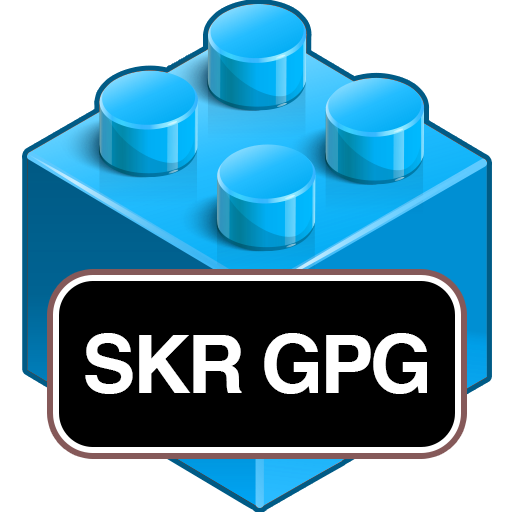
<style>
.page{position:relative;width:512px;height:512px;background:#ffffff}
.page>*{position:absolute;margin:0}
.t1{font:80px "Helvetica-Bold";letter-spacing:-0.04em;color:#ffffff}
</style>
<div class="page">
<p class="t1" style="left:85px;top:333px;width:342px;height:61px">SKR GPG</p>
</div>
